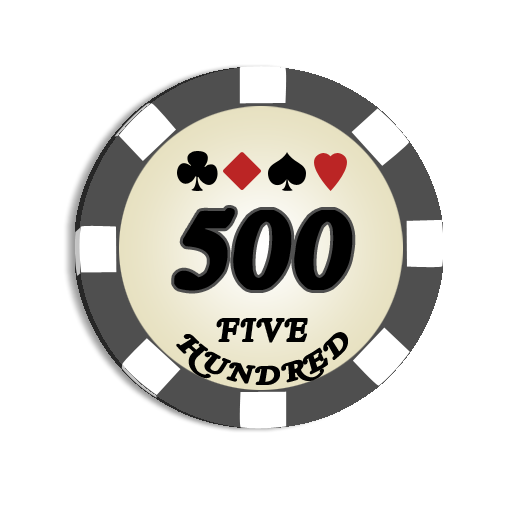
<style>
.page{position:relative;width:512px;height:512px;background:#ffffff}
.page>*{position:absolute;margin:0}
.t1{font:127.2px "RoyalAcid";color:#000000}
.t2{font:36px "RoyalAcid";color:#000000}
.t3{font:28.1px "RoyalAcid";color:#000000}
</style>
<div class="page">
<p class="t1" style="left:174px;top:208px;width:179px;height:83px">500</p>
<p class="t2" style="left:216px;top:318px;width:92px;height:25px">FIVE</p>
<p class="t3" style="left:176px;top:332px;width:172px;height:53px">HUNDRED</p>
</div>
